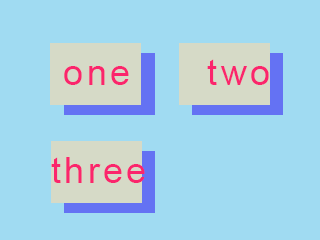
<style>
.page{position:relative;width:320px;height:240px;background:#a0dbf2}
.page>*{position:absolute;margin:0}
.t1{font:36px "ArialMT";letter-spacing:0.1em;color:#fb256c}
</style>
<div class="page">
<p class="t1" style="left:207px;top:59px;width:62px;height:26px">two</p>
<p class="t1" style="left:64px;top:66px;width:65px;height:19px">one</p>
<p class="t1" style="left:51px;top:157px;width:94px;height:26px">three</p>
</div>
